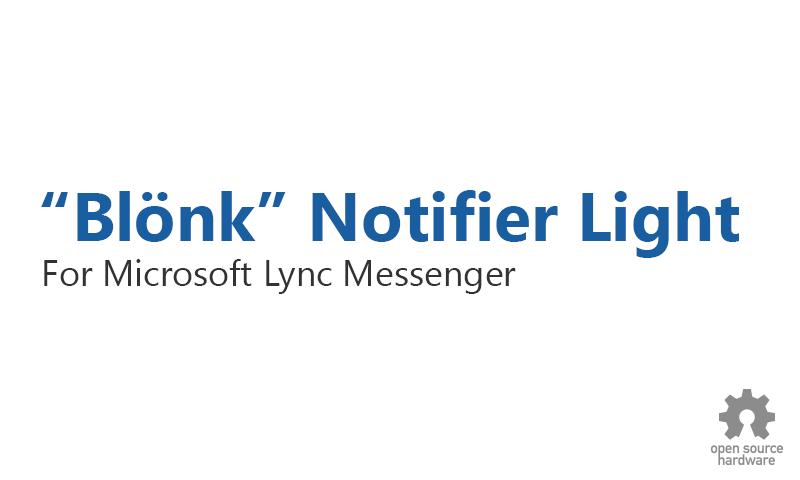
<style>
.page{position:relative;width:800px;height:480px;background:#ffffff}
.page>*{position:absolute;margin:0}
.t1{font:68px "SegoeUI-Bold";color:#185ea0}
.t2{font:36px "SegoeUI";color:#323232}
</style>
<div class="page">
<p class="t1" style="left:41px;top:190px;width:698px;height:68px">“Blönk” Notifier Light</p>
<p class="t2" style="left:44px;top:259px;width:472px;height:35px">For Microsoft Lync Messenger</p>
</div>
